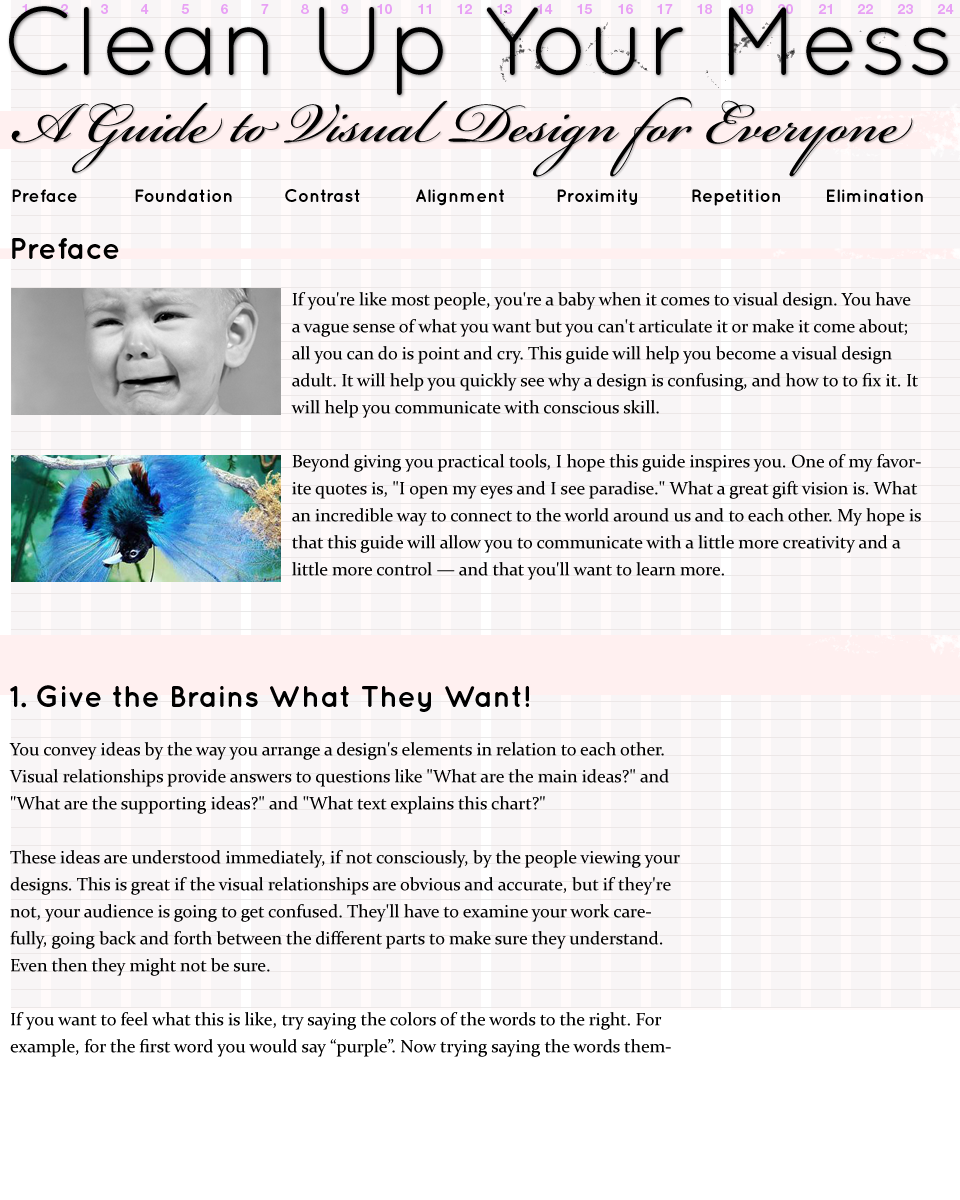
<style>
.page{position:relative;width:960px;height:1200px;background:#f8f5f6}
.page>*{position:absolute;margin:0}
.t1{font:97px "QuicksandBook-Regular";color:#000000}
.t2{font:87px "BickhamScriptPro-Regular";color:#000000}
.t3{font:18px "QuicksandBold-Regular";color:#000000}
.t4{font:30px "QuicksandBold-Regular";color:#000000}
.t5{font:18px/27px "Constantia";color:#000000}
</style>
<div class="page">
<p class="t1" style="left:9px;top:6px;width:939px;height:89px">Clean Up Your Mess</p>
<p class="t2" style="left:11px;top:97px;width:902px;height:80px">A Guide to Visual Design for Everyone</p>
<p class="t3" style="left:12px;top:189px;width:65px;height:13px">Preface</p>
<p class="t3" style="left:135px;top:189px;width:97px;height:13px">Foundation</p>
<p class="t3" style="left:285px;top:189px;width:75px;height:13px">Contrast</p>
<p class="t3" style="left:416px;top:189px;width:88px;height:17px">Alignment</p>
<p class="t3" style="left:557px;top:189px;width:80px;height:16px">Proximity</p>
<p class="t3" style="left:692px;top:189px;width:88px;height:17px">Repetition</p>
<p class="t3" style="left:827px;top:189px;width:96px;height:13px">Elimination</p>
<p class="t4" style="left:12px;top:238px;width:107px;height:21px">Preface</p>
<p class="t5" style="left:291px;top:292px;width:630px;height:288px">If you're like most people, you're a baby when it comes to visual design. You have a vague sense of what you want but you can't articulate it or make it come about; all you can do is point and cry. This guide will help you become a visual design adult. It will help you quickly see why a design is confusing, and how to to fix it. It will help you communicate with conscious skill.<br><br>Beyond giving you practical tools, I hope this guide inspires you. One of my favorite quotes is, "I open my eyes and I see paradise." What a great gift vision is. What an incredible way to connect to the world around us and to each other. My hope is that this guide will allow you to communicate with a little more creativity and a little more control — and that you'll want to learn more.</p>
<p class="t4" style="left:10px;top:685px;width:519px;height:27px">1. Give the Brains What They Want!</p>
<p class="t5" style="left:9px;top:742px;width:671px;height:315px">You convey ideas by the way you arrange a design's elements in relation to each other. Visual relationships provide answers to questions like "What are the main ideas?" and "What are the supporting ideas?" and "What text explains this chart?"<br><br>These ideas are understood immediately, if not consciously, by the people viewing your designs. This is great if the visual relationships are obvious and accurate, but if they're not, your audience is going to get confused. They'll have to examine your work carefully, going back and forth between the different parts to make sure they understand. Even then they might not be sure.<br><br>If you want to feel what this is like, try saying the colors of the words to the right. For example, for the first word you would say “purple”. Now trying saying the words themselves.</p>
</div>
